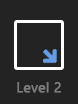
<style>
.page{position:relative;width:78px;height:104px;background:#232323}
.page>*{position:absolute;margin:0}
.t1{font:14px "SegoeUI";color:#7c7c7c;font-weight:bold}
</style>
<div class="page">
<p class="t1" style="left:17px;top:82px;width:44px;height:11px">Level 2</p>
</div>
